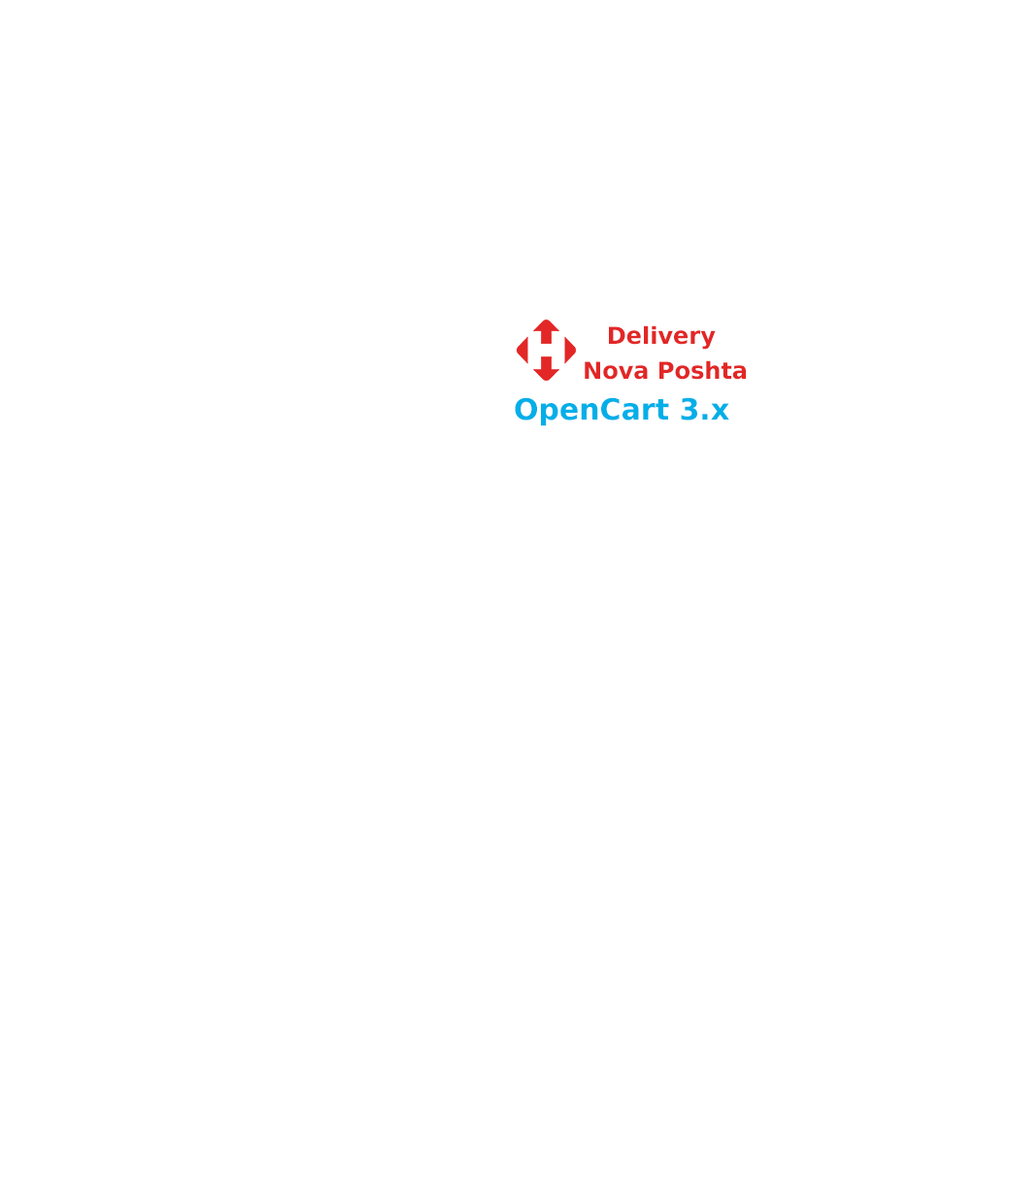
<style>
.page{position:relative;width:1010px;height:1181px;background:#ffffff}
.page>*{position:absolute;margin:0}
.t1{font:23.3px/35px "DejaVuSans-Bold";color:#e22726}
.t2{font:29.1px "DejaVuSans-Bold";color:#01afe8}
</style>
<div class="page">
<p class="t1" style="left:585px;top:325px;width:161px;height:55px;text-align:center">Delivery <br>Nova Poshta</p>
<p class="t2" style="left:515px;top:397px;width:214px;height:29px">OpenCart 3.x</p>
</div>
